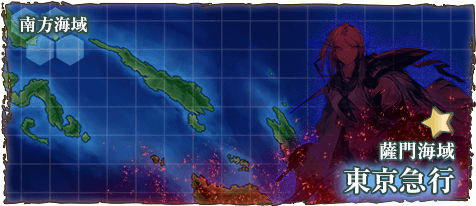
<style>
.page{position:relative;width:476px;height:206px}
.page>*{position:absolute;margin:0}
.t1{font:17px "RyuminPr6N-ExBold";color:#ffffff}
.t2{font:19px "RyuminPro-ExBold";color:#ffffff}
.t3{font:28px "RyuminPro-ExBold";color:#ffffff}
</style>
<div class="page">
<p class="t1" style="left:19px;top:16px;width:68px;height:17px">南方海域</p>
<p class="t2" style="left:380px;top:142px;width:75px;height:18px">薩門海域</p>
<p class="t3" style="left:344px;top:167px;width:110px;height:27px">東京急行</p>
</div>
